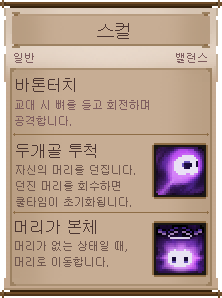
<style>
.page{position:relative;width:222px;height:298px;background:#c7ad94}
.page>*{position:absolute;margin:0}
.t1{font:18px "Gulim";color:#4b3531}
.t2{font:11px "Gulim";color:#7e5c5e}
.t3{font:16px "Gulim";color:#4b3531}
.t4{font:11px/16px "Gulim";color:#7e5c5e}
.t5{font:11px/16px "Gulim";color:#70574e}
</style>
<div class="page">
<p class="t1" style="left:97px;top:23px;width:32px;height:16px">스컬</p>
<p class="t2" style="left:14px;top:53px;width:20px;height:10px">일반</p>
<p class="t2" style="left:176px;top:53px;width:31px;height:10px">밸런스</p>
<p class="t3" style="left:16px;top:78px;width:59px;height:14px">바톤터치</p>
<p class="t4" style="left:15px;top:100px;width:134px;height:26px">교대 시 뼈를 들고 회전하며 <br>공격합니다.</p>
<p class="t3" style="left:16px;top:144px;width:80px;height:14px">두개골 투척</p>
<p class="t5" style="left:16px;top:165px;width:119px;height:42px">자신의 머리를 던집니다.<br>던진 머리를 회수하면 <br>쿨타임이 초기화됩니다.</p>
<p class="t3" style="left:15px;top:220px;width:81px;height:14px">머리가 본체</p>
<p class="t5" style="left:15px;top:241px;width:112px;height:26px">머리가 없는 상태일 때,<br>머리로 이동합니다.</p>
</div>
